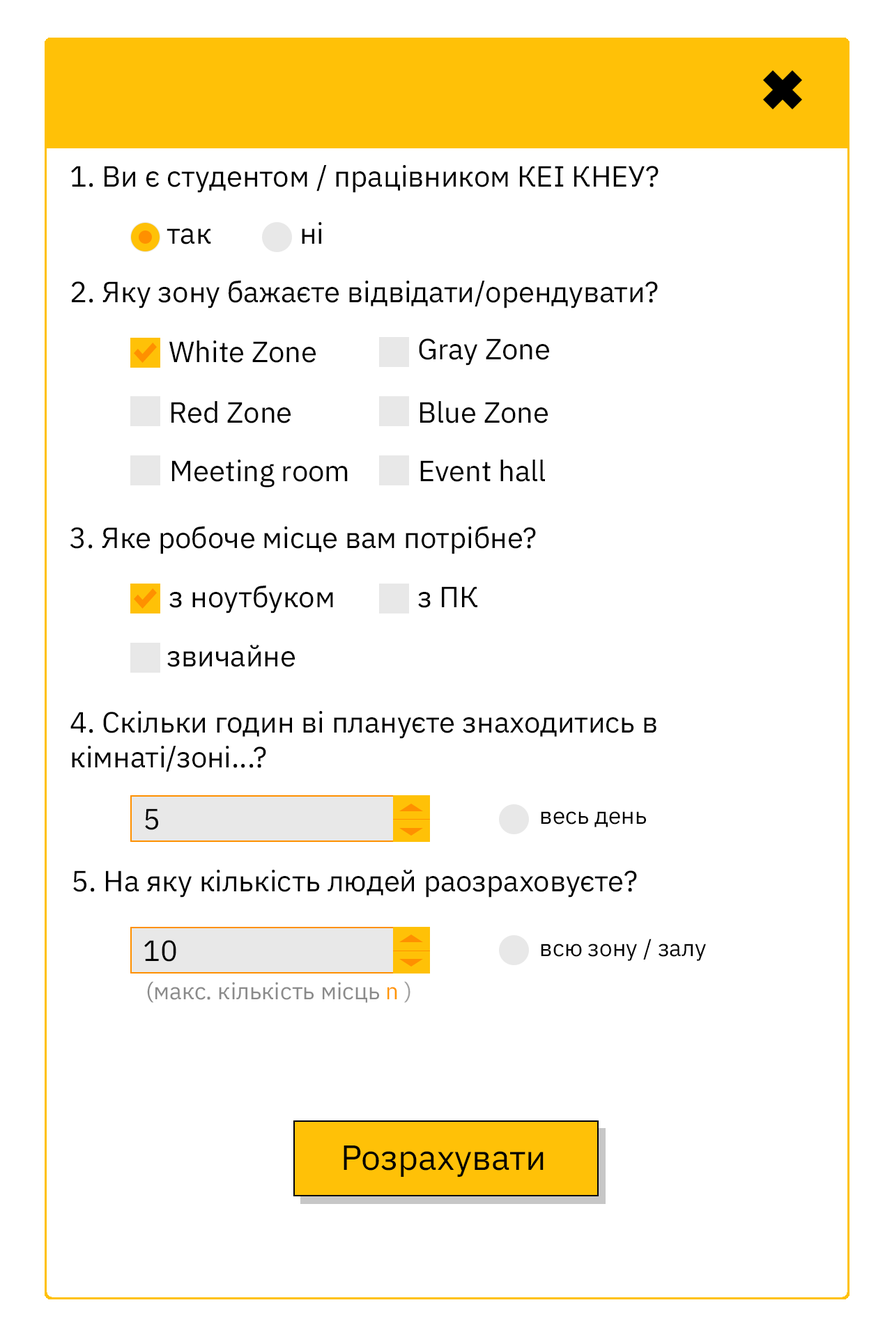
<style>
.page{position:relative;width:892px;height:1337px;background:#ffffff}
.page>*{position:absolute;margin:0}
.t1{font:29px "IBMPlexSans";color:#000000}
.t2{font:23.2px "IBMPlexSans";color:#000000}
.t3{font:23.2px "IBMPlexSans";color:#8a8a8a}
.t4{font:23.2px "IBMPlexSans";color:#ff9600}
.t5{font:23.2px "IBMPlexSans";color:#a0a0a0}
.t6{font:34.8px "IBMPlexSans";color:#000000}
</style>
<div class="page">
<p class="t1" style="left:71px;top:165px;width:587px;height:28px">1. Ви є студентом / працівником КЕІ КНЕУ?</p>
<p class="t1" style="left:166px;top:228px;width:45px;height:16px">так</p>
<p class="t1" style="left:302px;top:222px;width:20px;height:22px">ні</p>
<p class="t1" style="left:71px;top:280px;width:587px;height:29px">2. Яку зону бажаєте відвідати/орендувати?</p>
<p class="t1" style="left:169px;top:341px;width:147px;height:22px">White Zone</p>
<p class="t1" style="left:419px;top:339px;width:130px;height:27px">Gray Zone</p>
<p class="t1" style="left:171px;top:401px;width:119px;height:23px">Red Zone</p>
<p class="t1" style="left:420px;top:401px;width:127px;height:23px">Blue Zone</p>
<p class="t1" style="left:172px;top:460px;width:176px;height:28px">Meeting room</p>
<p class="t1" style="left:420px;top:460px;width:125px;height:22px">Event hall</p>
<p class="t1" style="left:70px;top:526px;width:466px;height:28px">3. Яке робоче місце вам потрібне?</p>
<p class="t1" style="left:169px;top:585px;width:164px;height:29px">з ноутбуком</p>
<p class="t1" style="left:418px;top:587px;width:59px;height:21px">з ПК</p>
<p class="t1" style="left:167px;top:644px;width:128px;height:23px">звичайне</p>
<p class="t1" style="left:70px;top:711px;width:586px;height:61px">4. Скільки годин ві плануєте знаходитись в           кімнаті/зоні...?</p>
<p class="t1" style="left:145px;top:809px;width:13px;height:21px">5</p>
<p class="t2" style="left:541px;top:811px;width:105px;height:17px">весь день</p>
<p class="t1" style="left:73px;top:869px;width:564px;height:29px">5. На яку кількість людей раозраховуєте?</p>
<p class="t1" style="left:144px;top:940px;width:32px;height:22px">10</p>
<p class="t2" style="left:541px;top:939px;width:165px;height:22px">всю зону / залу</p>
<p class="t3" style="left:147px;top:981px;width:263px;height:22px">(макс. кількість місць <span class="t4">n </span><span class="t5">)</span></p>
<p class="t6" style="left:343px;top:1146px;width:200px;height:31px">Розрахувати</p>
</div>
